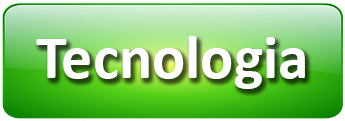
<style>
.page{position:relative;width:345px;height:121px}
.page>*{position:absolute;margin:0}
.t1{font:62px "Calibri-Bold";color:#ffffff}
</style>
<div class="page">
<p class="t1" style="left:36px;top:36px;width:269px;height:53px">Tecnologia</p>
</div>
